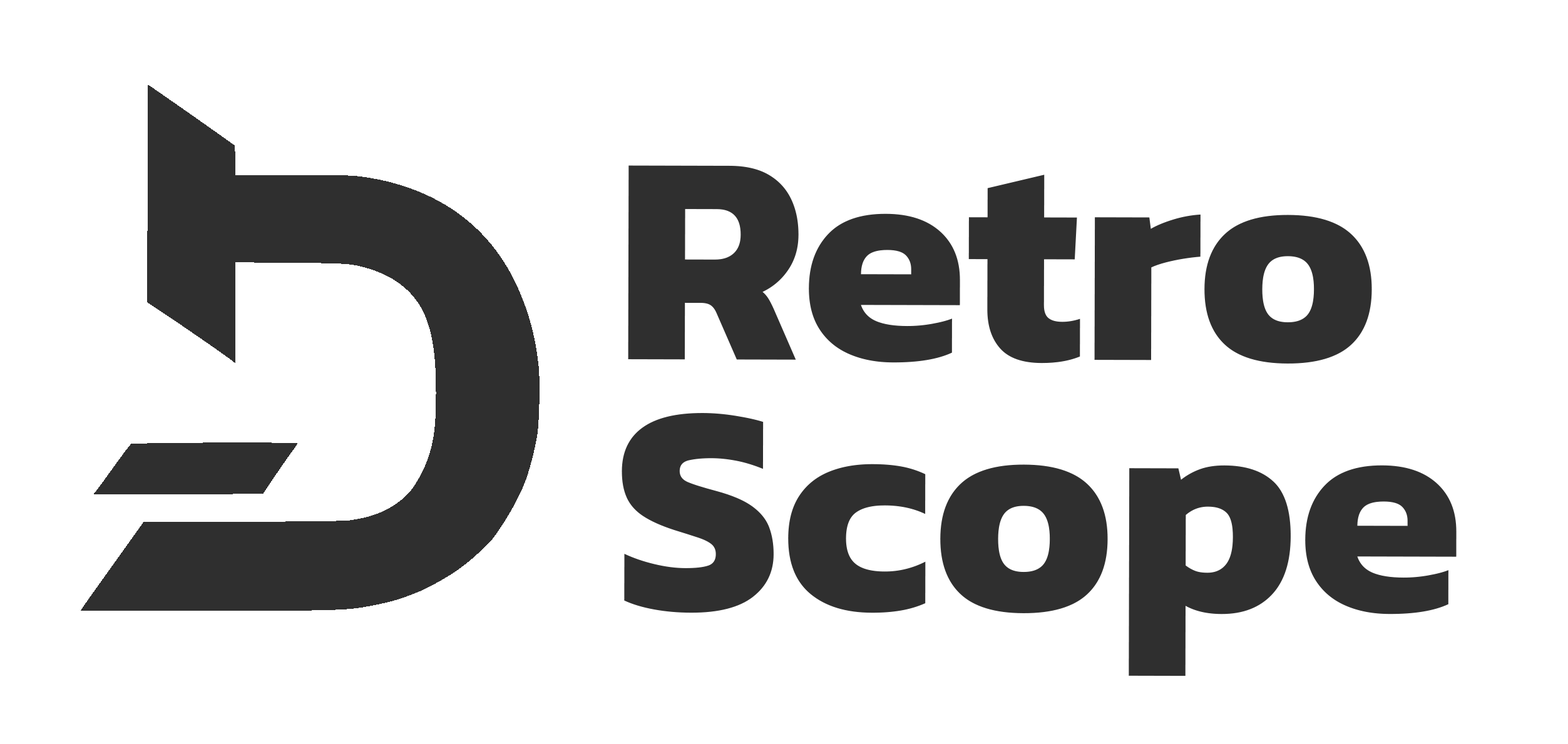
<style>
.page{position:relative;width:1568px;height:744px;background:#ffffff}
.page>*{position:absolute;margin:0}
.t1{font:300.7px/250.4px "Kanit-Bold";color:#2f2f2f}
</style>
<div class="page">
<p class="t1" style="left:622px;top:165px;width:835px;height:512px">Retro<br>Scope</p>
</div>
